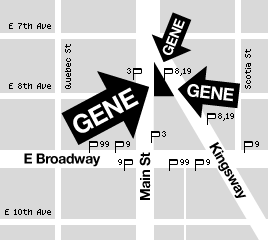
<style>
.page{position:relative;width:268px;height:240px;background:#d9d9d9}
.page>*{position:absolute;margin:0}
.t1{font:8px "MagicForest";color:#000000}
.t2{font:14px "HelveticaNeue-Bold";letter-spacing:-0.025em;color:#000000}
</style>
<div class="page">
<p class="t1" style="left:9px;top:23px;width:42px;height:6px">E 7th Ave</p>
<p class="t1" style="left:65px;top:44px;width:6px;height:45px;rotate:-90deg">Quebec St</p>
<p class="t1" style="left:245px;top:49px;width:6px;height:40px;rotate:-90deg">Scotia St</p>
<p class="t1" style="left:127px;top:68px;width:4px;height:6px">3</p>
<p class="t1" style="left:175px;top:68px;width:16px;height:8px">8,19</p>
<p class="t1" style="left:9px;top:83px;width:42px;height:6px">E 8th Ave</p>
<p class="t1" style="left:218px;top:113px;width:16px;height:8px">8,19</p>
<p class="t1" style="left:162px;top:131px;width:4px;height:6px">3</p>
<p class="t1" style="left:100px;top:141px;width:9px;height:6px">99</p>
<p class="t1" style="left:126px;top:141px;width:4px;height:6px">9</p>
<p class="t2" style="left:209px;top:141px;width:38px;height:57px;rotate:60deg">Kingsway</p>
<p class="t1" style="left:255px;top:141px;width:4px;height:6px">9</p>
<p class="t2" style="left:24px;top:153px;width:77px;height:14px">E Broadway</p>
<p class="t1" style="left:118px;top:159px;width:4px;height:6px">9</p>
<p class="t2" style="left:139px;top:152px;width:12px;height:48px;rotate:-90deg">Main St</p>
<p class="t1" style="left:180px;top:159px;width:9px;height:6px">99</p>
<p class="t1" style="left:206px;top:159px;width:4px;height:6px">9</p>
<p class="t1" style="left:5px;top:209px;width:46px;height:6px">E 10th Ave</p>
</div>
